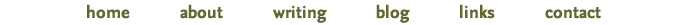
<style>
.page{position:relative;width:700px;height:25px;background:#ffffff}
.page>*{position:absolute;margin:0}
.t1{font:18px "NexusSans-Bold";color:#666633}
</style>
<div class="page">
<p class="t1" style="left:87px;top:4px;width:514px;height:19px">home          about          writing          blog          links          contact</p>
</div>
